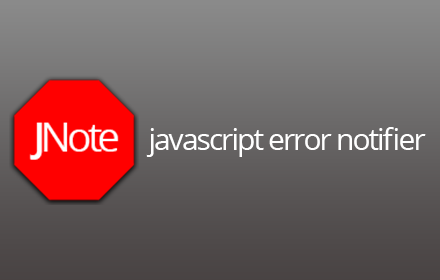
<style>
.page{position:relative;width:440px;height:280px}
.page>*{position:absolute;margin:0}
.t1{font:30px "OpenSans";letter-spacing:-0.065em;color:#ffffff}
</style>
<div class="page">
<p class="t1" style="left:146px;top:127px;width:280px;height:30px">javascript error notifier</p>
</div>
